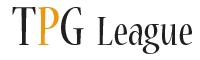
<style>
.page{position:relative;width:200px;height:60px;background:#ffffff}
.page>*{position:absolute;margin:0}
.t1{font:45.7px "NuevaStd-Cond";color:#212020}
.t2{font:61px "NuevaStd-Cond";color:#212020}
.t3{font:61px "NuevaStd-Cond";color:#ee960c}
</style>
<div class="page">
<p class="t1" style="left:12px;top:7px;width:180px;height:47px"><span class="t2">T</span><span class="t3">P</span><span class="t2">G</span>  League</p>
</div>
